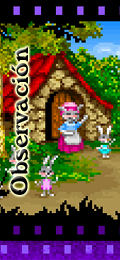
<style>
.page{position:relative;width:120px;height:260px}
.page>*{position:absolute;margin:0}
.t1{font:24px "WindsorBT-Roman";color:#000000}
</style>
<div class="page">
<p class="t1" style="left:10px;top:47px;width:19px;height:148px;rotate:-90deg">Observación</p>
</div>
